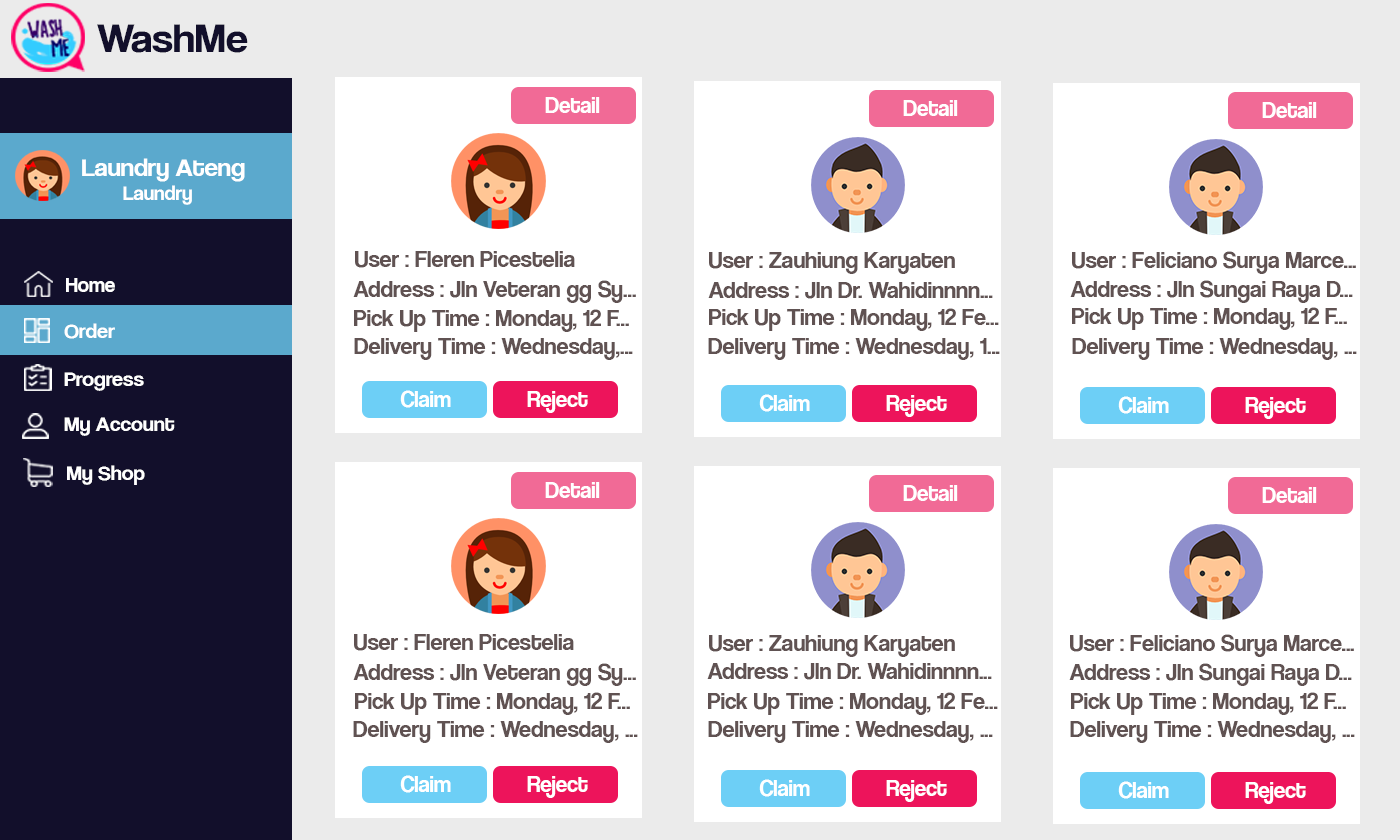
<style>
.page{position:relative;width:1400px;height:840px;background:#ffffff}
.page>*{position:absolute;margin:0}
.t1{font:42.1px "CoolveticaRg-Regular";color:#120f2b;scale:1.05 1}
.t2{font:22.7px "CoolveticaRg-Regular";color:#ffffff}
.t3{font:25.2px "CoolveticaRg-Regular";color:#ffffff;scale:1.05 1}
.t4{font:20px "CoolveticaRg-Regular";color:#ffffff;scale:1.05 1}
.t5{font:24px "CoolveticaRg-Regular";color:#605252}
.t6{font:21px "CoolveticaRg-Regular";color:#ffffff}
.t7{font:21px "CoolveticaRg-Regular";color:#ffffff;scale:1.05 1}
</style>
<div class="page">
<p class="t1" style="left:97px;top:24px;width:151px;height:29px">WashMe</p>
<p class="t2" style="left:545px;top:97px;width:55px;height:16px">Detail</p>
<p class="t2" style="left:903px;top:100px;width:55px;height:16px">Detail</p>
<p class="t2" style="left:1262px;top:102px;width:55px;height:16px">Detail</p>
<p class="t3" style="left:82px;top:158px;width:163px;height:47px">Laundry Ateng<br><span class="t4">        Laundry</span></p>
<p class="t5" style="left:355px;top:251px;width:220px;height:17px">User : Fleren Picestelia</p>
<p class="t5" style="left:709px;top:252px;width:246px;height:22px">User : Zauhiung Karyaten</p>
<p class="t5" style="left:1072px;top:251px;width:284px;height:23px">User : Feliciano Surya Marce...</p>
<p class="t6" style="left:66px;top:278px;width:49px;height:14px">Home</p>
<p class="t5" style="left:353px;top:280px;width:283px;height:23px">Address : Jln Veteran gg Sy...</p>
<p class="t5" style="left:1070px;top:280px;width:283px;height:23px">Address : Jln Sungai Raya D...</p>
<p class="t5" style="left:708px;top:282px;width:285px;height:17px">Address : Jln Dr. Wahidinnnn...</p>
<p class="t5" style="left:354px;top:309px;width:275px;height:23px">Pick Up Time : Monday, 12 F...</p>
<p class="t5" style="left:709px;top:308px;width:290px;height:23px">Pick Up Time : Monday, 12 Fe...</p>
<p class="t5" style="left:1072px;top:307px;width:275px;height:23px">Pick Up Time : Monday, 12 F...</p>
<p class="t7" style="left:64px;top:323px;width:51px;height:16px">Order</p>
<p class="t5" style="left:354px;top:338px;width:279px;height:22px">Delivery Time : Wednesday,...</p>
<p class="t5" style="left:708px;top:338px;width:292px;height:22px">Delivery Time : Wednesday, 1...</p>
<p class="t5" style="left:1072px;top:338px;width:285px;height:22px">Delivery Time : Wednesday, ...</p>
<p class="t7" style="left:64px;top:372px;width:80px;height:19px">Progress</p>
<p class="t2" style="left:400px;top:390px;width:51px;height:18px">Claim</p>
<p class="t2" style="left:527px;top:391px;width:61px;height:22px">Reject</p>
<p class="t2" style="left:759px;top:394px;width:51px;height:18px">Claim</p>
<p class="t2" style="left:886px;top:395px;width:61px;height:22px">Reject</p>
<p class="t2" style="left:1118px;top:396px;width:51px;height:18px">Claim</p>
<p class="t2" style="left:1245px;top:397px;width:61px;height:22px">Reject</p>
<p class="t7" style="left:64px;top:417px;width:111px;height:19px">My Account</p>
<p class="t7" style="left:67px;top:465px;width:78px;height:20px">My Shop</p>
<p class="t2" style="left:545px;top:482px;width:55px;height:16px">Detail</p>
<p class="t2" style="left:903px;top:485px;width:55px;height:16px">Detail</p>
<p class="t2" style="left:1262px;top:487px;width:55px;height:16px">Detail</p>
<p class="t5" style="left:354px;top:634px;width:220px;height:17px">User : Fleren Picestelia</p>
<p class="t5" style="left:709px;top:635px;width:246px;height:22px">User : Zauhiung Karyaten</p>
<p class="t5" style="left:1070px;top:634px;width:284px;height:23px">User : Feliciano Surya Marce...</p>
<p class="t5" style="left:353px;top:663px;width:283px;height:23px">Address : Jln Veteran gg Sy...</p>
<p class="t5" style="left:707px;top:663px;width:285px;height:17px">Address : Jln Dr. Wahidinnnn...</p>
<p class="t5" style="left:1069px;top:663px;width:283px;height:23px">Address : Jln Sungai Raya D...</p>
<p class="t5" style="left:355px;top:692px;width:275px;height:23px">Pick Up Time : Monday, 12 F...</p>
<p class="t5" style="left:708px;top:692px;width:290px;height:23px">Pick Up Time : Monday, 12 Fe...</p>
<p class="t5" style="left:1071px;top:692px;width:275px;height:23px">Pick Up Time : Monday, 12 F...</p>
<p class="t5" style="left:353px;top:721px;width:285px;height:22px">Delivery Time : Wednesday, ...</p>
<p class="t5" style="left:708px;top:721px;width:285px;height:22px">Delivery Time : Wednesday, ...</p>
<p class="t5" style="left:1070px;top:721px;width:285px;height:22px">Delivery Time : Wednesday, ...</p>
<p class="t2" style="left:400px;top:775px;width:51px;height:18px">Claim</p>
<p class="t2" style="left:527px;top:776px;width:61px;height:22px">Reject</p>
<p class="t2" style="left:759px;top:779px;width:51px;height:18px">Claim</p>
<p class="t2" style="left:886px;top:780px;width:61px;height:22px">Reject</p>
<p class="t2" style="left:1118px;top:781px;width:51px;height:18px">Claim</p>
<p class="t2" style="left:1245px;top:782px;width:61px;height:22px">Reject</p>
</div>
